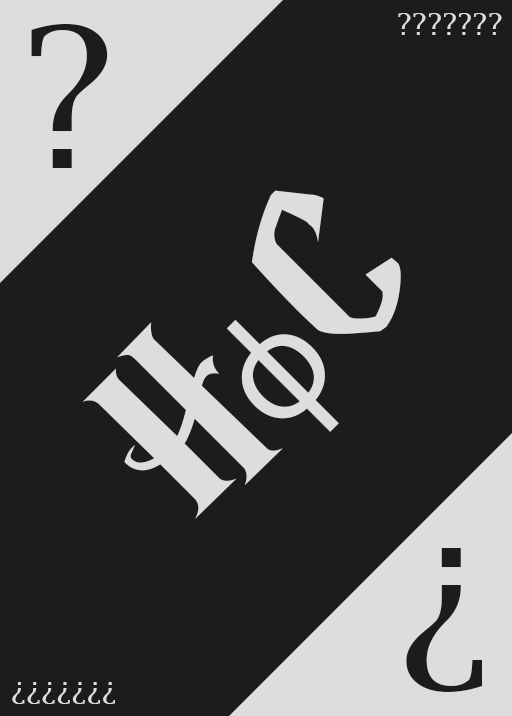
<style>
.page{position:relative;width:512px;height:716px;background:#1c1c1e}
.page>*{position:absolute;margin:0}
.t1{font:30px "LucidaFax";color:#dddddd}
.t2{font:194.9px "LucidaBright";color:#1c1c1e}
.t3{font:250px "HarryP";color:#dddddd}
.t4{font:150.8px "SegoeUI";color:#dddddd}
</style>
<div class="page">
<p class="t1" style="left:398px;top:13px;width:104px;height:22px">???????</p>
<p class="t2" style="left:31px;top:24px;width:77px;height:144px">?</p>
<p class="t3" style="left:82px;top:190px;width:319px;height:329px;rotate:-45deg">H<span class="t4">ɸ</span>C</p>
<p class="t2" style="left:406px;top:548px;width:76px;height:144px;rotate:180deg">?</p>
<p class="t1" style="left:12px;top:682px;width:103px;height:22px;rotate:180deg">???????</p>
</div>
